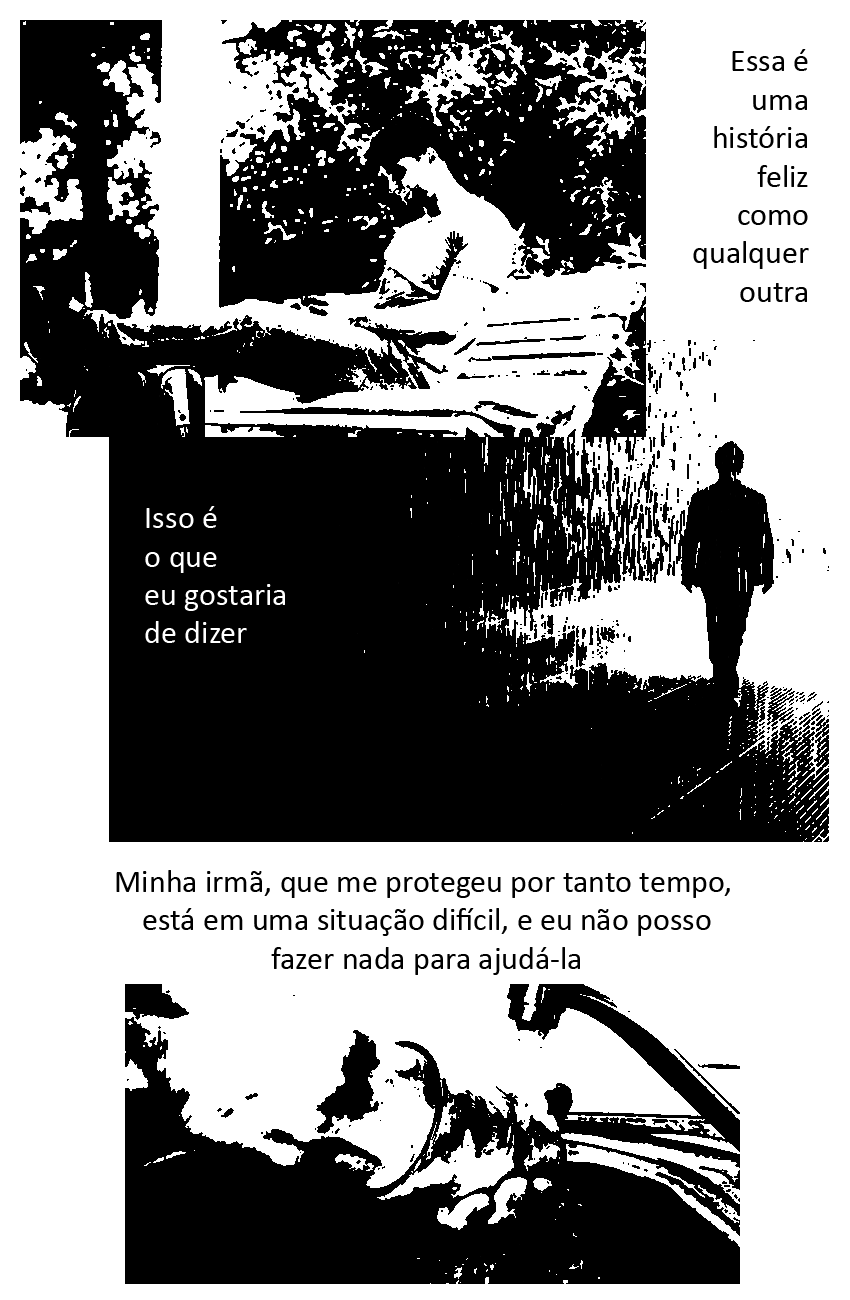
<style>
.page{position:relative;width:850px;height:1300px;background:#ffffff}
.page>*{position:absolute;margin:0}
.t1{font:32px "Calibri";color:#000000}
.t2{font:32px "Calibri";color:#ffffff}
</style>
<div class="page">
<p class="t1" style="left:693px;top:49px;width:116px;height:253px;text-align:right">Essa é<br>uma<br>história<br>feliz<br>como<br>qualquer<br>outra</p>
<p class="t2" style="left:145px;top:506px;width:140px;height:137px">Isso é<br>o que <br>eu gostaria <br>de dizer</p>
<p class="t1" style="left:116px;top:870px;width:614px;height:105px;text-align:center">Minha irmã, que me protegeu por tanto tempo, <br>está em uma situação difícil, e eu não posso<br>fazer nada para ajudá-la</p>
</div>
